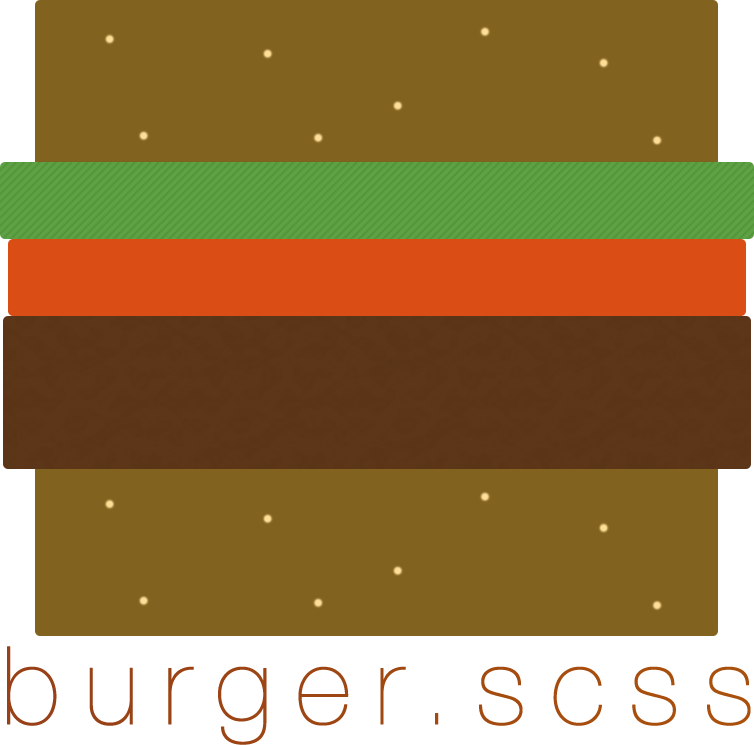
<style>
.page{position:relative;width:754px;height:745px;background:#81621f}
.page>*{position:absolute;margin:0}
.t1{font:108.2px "HelveticaNeue-UltraLight";letter-spacing:0.2em;color:#9e4613;font-weight:bold}
</style>
<div class="page">
<p class="t1" style="left:7px;top:646px;width:744px;height:99px">burger.scss</p>
</div>
